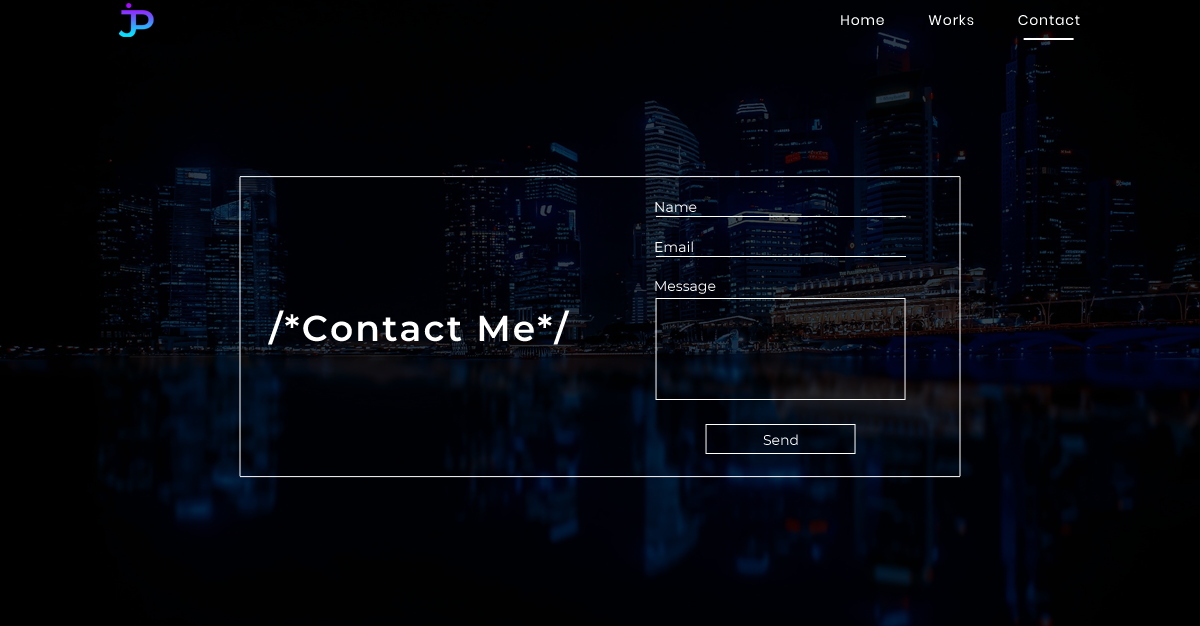
<style>
.page{position:relative;width:1200px;height:626px}
.page>*{position:absolute;margin:0}
.t1{font:14px "Poppins-Regular";letter-spacing:0.06em;color:#ffffff}
.t2{font:14px "Montserrat-Regular";color:#ffffff}
.t3{font:36px "Montserrat-SemiBold";letter-spacing:0.06em;color:#ffffff}
</style>
<div class="page">
<p class="t1" style="left:841px;top:14px;width:239px;height:11px">Home          Works          Contact</p>
<p class="t2" style="left:655px;top:202px;width:42px;height:10px">Name</p>
<p class="t2" style="left:655px;top:241px;width:38px;height:11px">Email</p>
<p class="t2" style="left:655px;top:281px;width:61px;height:13px">Message</p>
<p class="t3" style="left:268px;top:310px;width:302px;height:35px">/*Contact Me*/</p>
<p class="t2" style="left:763px;top:434px;width:35px;height:11px">Send</p>
</div>
